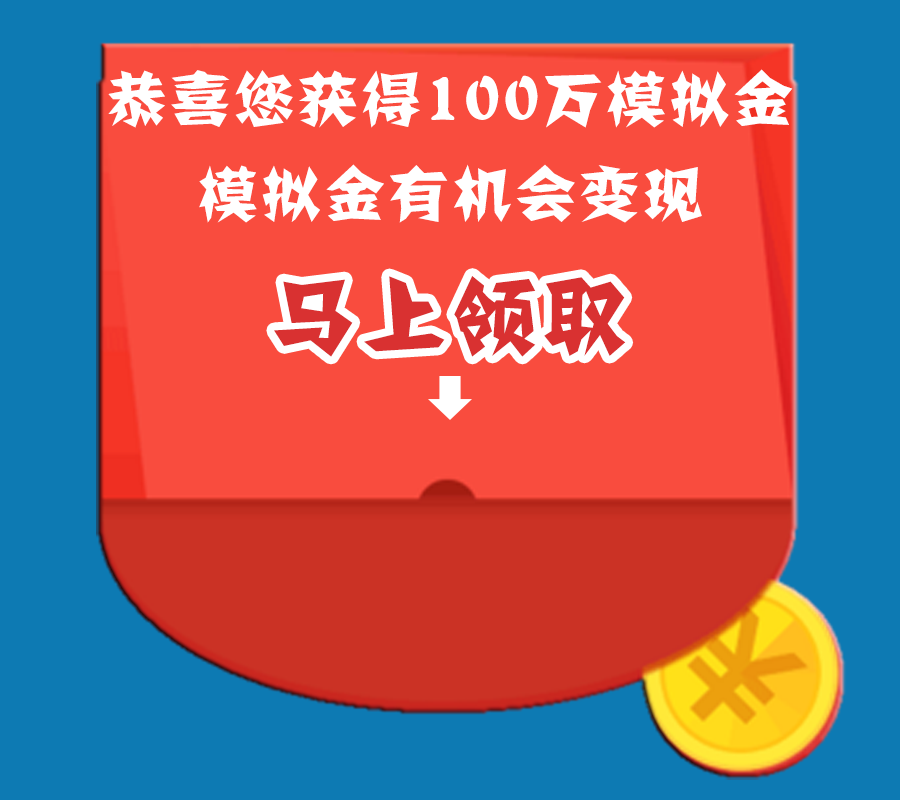
<style>
.page{position:relative;width:900px;height:800px;background:#0d7ab3}
.page>*{position:absolute;margin:0}
.t1{font:60px "JJianzi";letter-spacing:0.06em;color:#ffffff}
.t2{font:85px "JJianzi";letter-spacing:0.06em;color:#d93131}
</style>
<div class="page">
<p class="t1" style="left:108px;top:69px;width:685px;height:59px">恭喜您获得100万模拟金</p>
<p class="t1" style="left:199px;top:164px;width:503px;height:59px">模拟金有机会变现</p>
<p class="t2" style="left:274px;top:276px;width:352px;height:81px">马上领取</p>
</div>
